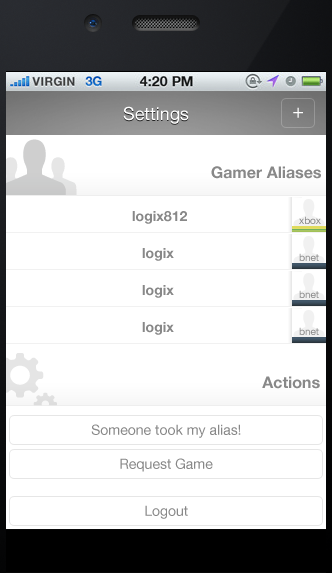
<style>
.page{position:relative;width:332px;height:573px;background:#ffffff}
.page>*{position:absolute;margin:0}
.t1{font:18px "HelveticaNeue";color:#ffffff}
.t2{font:20px "HelveticaNeue";color:#ffffff}
.t3{font:16px "HelveticaNeue-Bold";color:#888888}
.t4{font:14px "HelveticaNeue-Bold";color:#888888}
.t5{font:10px "HelveticaNeue";color:#888888}
.t6{font:14px "HelveticaNeue";color:#888888}
</style>
<div class="page">
<p class="t1" style="left:123px;top:106px;width:66px;height:18px">Settings</p>
<p class="t2" style="left:293px;top:107px;width:10px;height:11px">+</p>
<p class="t3" style="left:211px;top:166px;width:110px;height:13px">Gamer Aliases</p>
<p class="t4" style="left:132px;top:211px;width:55px;height:13px">logix812</p>
<p class="t5" style="left:299px;top:216px;width:22px;height:8px">xbox</p>
<p class="t4" style="left:142px;top:248px;width:32px;height:13px">logix</p>
<p class="t5" style="left:299px;top:253px;width:20px;height:8px">bnet</p>
<p class="t4" style="left:142px;top:285px;width:32px;height:13px">logix</p>
<p class="t5" style="left:299px;top:290px;width:20px;height:8px">bnet</p>
<p class="t4" style="left:142px;top:322px;width:32px;height:13px">logix</p>
<p class="t5" style="left:299px;top:327px;width:20px;height:8px">bnet</p>
<p class="t3" style="left:262px;top:376px;width:58px;height:13px">Actions</p>
<p class="t6" style="left:91px;top:424px;width:150px;height:14px">Someone took my alias!</p>
<p class="t6" style="left:120px;top:458px;width:93px;height:14px">Request Game</p>
<p class="t6" style="left:145px;top:505px;width:43px;height:14px">Logout</p>
</div>
